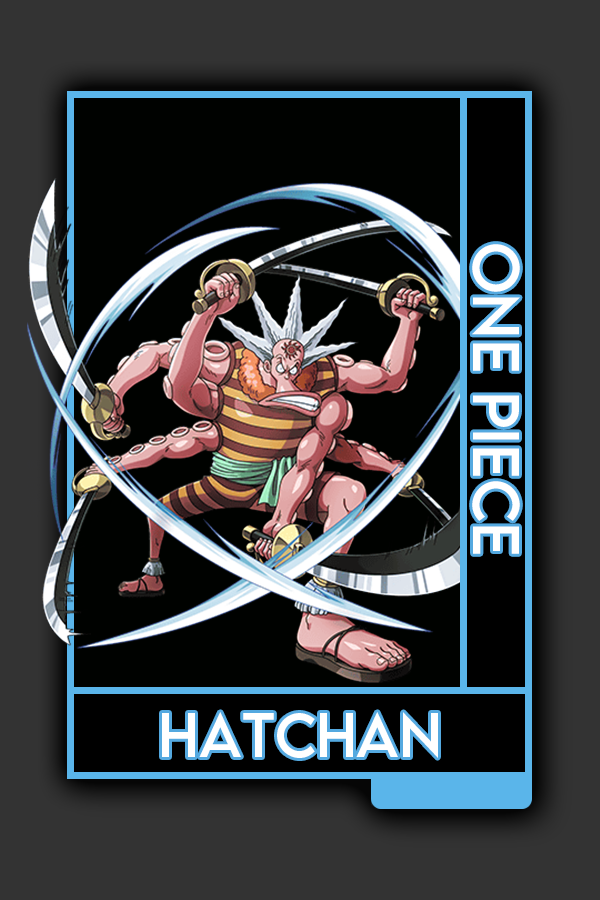
<style>
.page{position:relative;width:600px;height:900px;background:#333333}
.page>*{position:absolute;margin:0}
.t1{font:58.4px "LEMONMILK-Regular";color:#ffffff}
.t2{font:55.4px "LEMONMILK-Regular";color:#ffffff}
</style>
<div class="page">
<p class="t1" style="left:472px;top:244px;width:48px;height:310px;rotate:90deg">One Piece</p>
<p class="t2" style="left:162px;top:712px;width:276px;height:46px">Hatchan</p>
</div>
